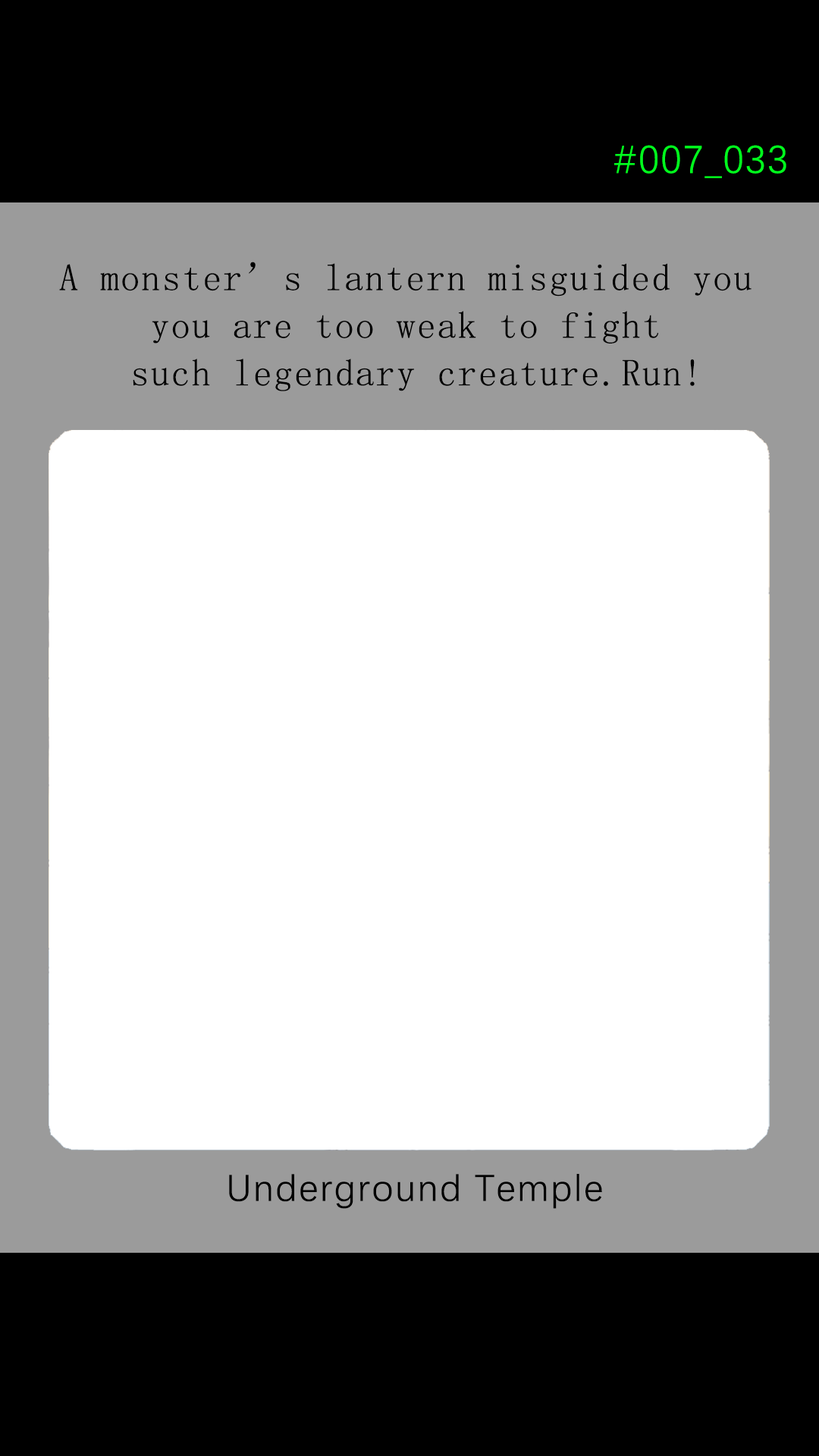
<style>
.page{position:relative;width:819px;height:1456px;background:#ffffff}
.page>*{position:absolute;margin:0}
.t1{font:39.2px "DengXian-Regular";letter-spacing:0.04em;color:#00ff1e}
.t2{font:37.9px/47.6px "SimSun";letter-spacing:0.04em;color:#000000}
.t3{font:37.9px "DengXian-Regular";letter-spacing:0.04em;color:#000000}
</style>
<div class="page">
<p class="t1" style="left:614px;top:145px;width:172px;height:33px">#007_033</p>
<p class="t2" style="left:59px;top:262px;width:692px;height:129px;text-align:center">A monster’s lantern misguided you <br>you are too weak to fight <br>such legendary creature.Run!</p>
<p class="t3" style="left:229px;top:1174px;width:373px;height:35px">Underground Temple</p>
</div>
